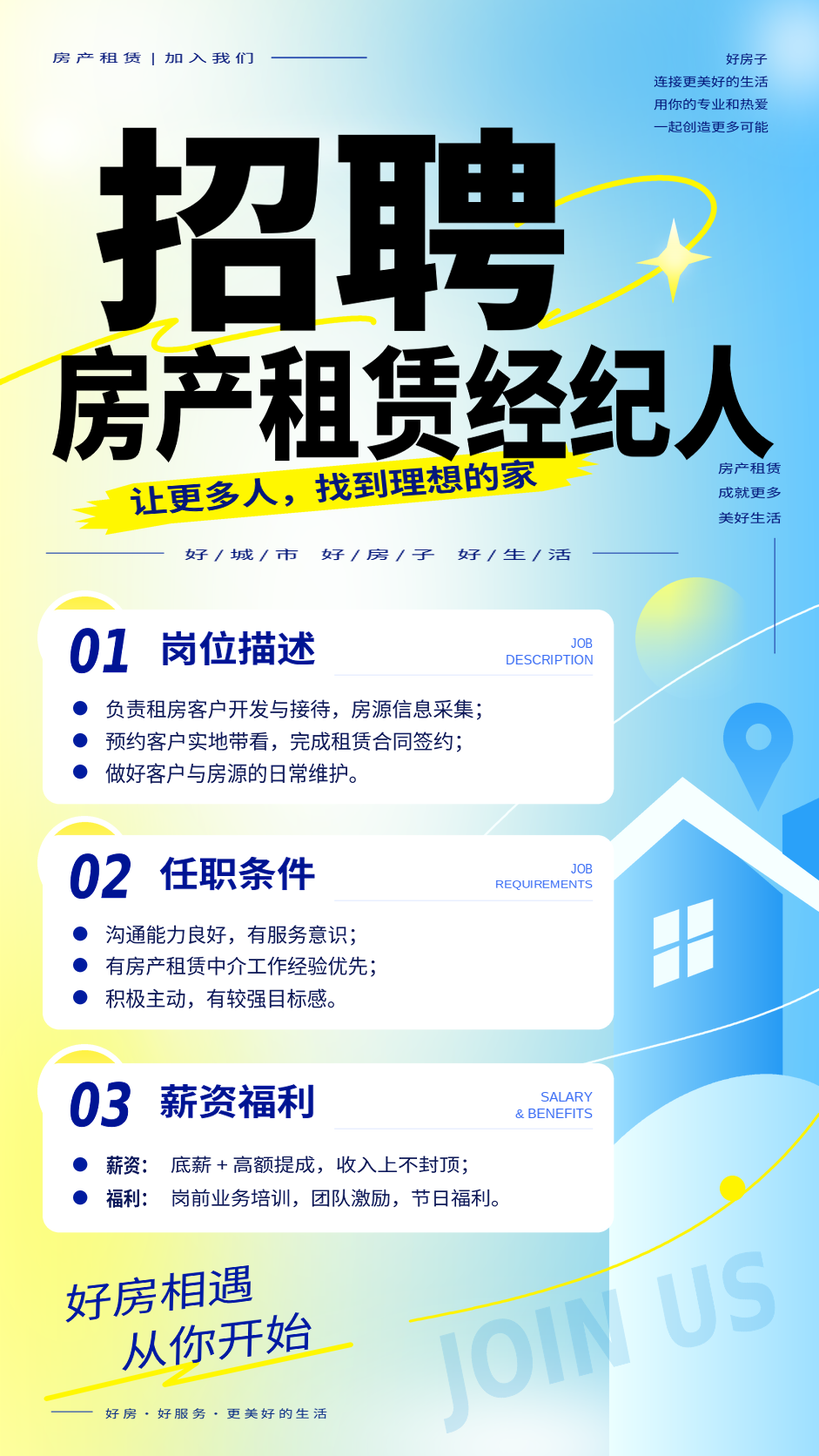
<style>
.page{position:relative;width:819px;height:1456px;background:#ffffff}
.page>*{position:absolute;margin:0}
.t1{font:11.2px "NotoSansCJKsc-Regular";color:#05187a;scale:1.72 1}
.t2{font:11.5px "NotoSansCJKsc-Regular";color:#05187a;scale:1.21 1}
.t3{font:11.5px "NotoSansCJKsc-Regular";color:#05187a;scale:1.25 1}
.t4{font:213.7px "SourceHanSansCN-Heavy";color:#000000;scale:1.12 1}
.t5{font:120.9px "SourceHanSansCN-Heavy";color:#000000;scale:0.86 1}
.t6{font:30.1px "NotoSansCJKsc-Bold";color:#05187a;scale:1.23 1}
.t7{font:11.5px "NotoSansCJKsc-Regular";color:#05187a;scale:1.38 1}
.t8{font:11.8px "NotoSansCJKsc-Regular";color:#05187a;scale:2.07 1}
.t9{font:60px "DejaVuSansCondensed-BoldOblique";color:#001494;scale:0.85 1}
.t10{font:35.6px "NotoSansCJKsc-Bold";color:#001491;scale:1.1 1}
.t11{font:13.1px "LiberationSans";color:#396cf4;scale:0.86 1}
.t12{font:13.1px "LiberationSans";color:#396cf4}
.t13{font:19.5px "NotoSansCJKsc-Regular";color:#0b1654;scale:1.05 1}
.t14{font:20.9px "NotoSansCJKsc-Regular";color:#0b1654}
.t15{font:34.8px "NotoSansCJKsc-Bold";color:#001491;scale:1.12 1}
.t16{font:10.3px "LiberationSans";color:#396cf4;scale:1.18 1}
.t17{font:19.5px "NotoSansCJKsc-Regular";color:#0b1654;scale:1.04 1}
.t18{font:20.1px "NotoSansCJKsc-Regular";color:#0b1654}
.t19{font:19.2px "NotoSansCJKsc-Bold";color:#081455;scale:0.89 1}
.t20{font:17.8px "NotoSansCJKsc-Regular";color:#0b1654;scale:1.16 1}
.t21{font:18.5px "NotoSansCJKsc-Regular";color:#0b1654;scale:1.08 1}
.t22{font:103.6px "DejaVuSansCondensed-Bold";color:#a9ddef;scale:0.87 1}
.t23{font:40.2px "NotoSansCJKsc-Regular";color:#001aa0;scale:1.19 1}
.t24{font:41.3px "NotoSansCJKsc-Regular";color:#001aa0;scale:1.17 1}
.t25{font:10.7px "NotoSansCJKsc-Regular";color:#0a2d86;scale:1.33 1}
</style>
<div class="page">
<p class="t1" style="left:52px;top:52px;width:201px;height:13px">房 产 租 赁  |  加 入 我 们</p>
<p class="t2" style="left:726px;top:53px;width:42px;height:12px">好房子</p>
<p class="t3" style="left:654px;top:76px;width:115px;height:12px">连接更美好的生活</p>
<p class="t3" style="left:654px;top:98px;width:115px;height:13px">用你的专业和热爱</p>
<p class="t3" style="left:654px;top:121px;width:115px;height:12px">一起创造更多可能</p>
<p class="t4" style="left:95px;top:127px;width:470px;height:205px">招聘</p>
<p class="t5" style="left:51px;top:344px;width:724px;height:119px">房产租赁经纪人</p>
<p class="t6" style="left:129px;top:459px;width:409px;height:57px;rotate:-4deg">让更多人，找到理想的家</p>
<p class="t7" style="left:718px;top:462px;width:63px;height:12px">房产租赁</p>
<p class="t7" style="left:718px;top:487px;width:63px;height:12px">成就更多</p>
<p class="t7" style="left:718px;top:512px;width:64px;height:12px">美好生活</p>
<p class="t8" style="left:185px;top:548px;width:387px;height:14px">好 / 城 / 市    好 / 房 / 子    好 / 生 / 活</p>
<p class="t9" style="left:70px;top:628px;width:58px;height:46px">01</p>
<p class="t10" style="left:162px;top:630px;width:154px;height:35px">岗位描述</p>
<p class="t11" style="left:571px;top:638px;width:22px;height:10px">JOB</p>
<p class="t12" style="left:506px;top:655px;width:87px;height:9px">DESCRIPTION</p>
<p class="t13" style="left:105px;top:699px;width:377px;height:21px">负责租房客户开发与接待，房源信息采集；</p>
<p class="t13" style="left:105px;top:731px;width:357px;height:21px">预约客户实地带看，完成租赁合同签约；</p>
<p class="t14" style="left:105px;top:763px;width:252px;height:21px">做好客户与房源的日常维护。</p>
<p class="t9" style="left:70px;top:853px;width:61px;height:46px">02</p>
<p class="t15" style="left:159px;top:856px;width:157px;height:35px">任职条件</p>
<p class="t11" style="left:571px;top:864px;width:22px;height:9px">JOB</p>
<p class="t16" style="left:495px;top:880px;width:98px;height:10px">REQUIREMENTS</p>
<p class="t17" style="left:105px;top:925px;width:250px;height:20px">沟通能力良好，有服务意识；</p>
<p class="t17" style="left:105px;top:956px;width:270px;height:21px">有房产租赁中介工作经验优先；</p>
<p class="t18" style="left:105px;top:988px;width:230px;height:21px">积极主动，有较强目标感。</p>
<p class="t9" style="left:70px;top:1081px;width:61px;height:46px">03</p>
<p class="t10" style="left:159px;top:1084px;width:155px;height:35px">薪资福利</p>
<p class="t12" style="left:541px;top:1092px;width:52px;height:9px">SALARY</p>
<p class="t12" style="left:515px;top:1108px;width:78px;height:10px">&amp; BENEFITS</p>
<p class="t19" style="left:106px;top:1155px;width:41px;height:19px">薪资：</p>
<p class="t20" style="left:171px;top:1155px;width:296px;height:19px">底薪 + 高额提成，收入上不封顶；</p>
<p class="t19" style="left:106px;top:1188px;width:41px;height:19px">福利：</p>
<p class="t21" style="left:172px;top:1188px;width:327px;height:19px">岗前业务培训，团队激励，节日福利。</p>
<p class="t22" style="left:439px;top:1250px;width:337px;height:183px;rotate:-15deg">JOIN US</p>
<p class="t23" style="left:65px;top:1264px;width:188px;height:59px;rotate:-7deg">好房相遇</p>
<p class="t24" style="left:121px;top:1312px;width:192px;height:58px;rotate:-7deg">从你开始</p>
<p class="t25" style="left:105px;top:1408px;width:222px;height:11px">好 房 · 好 服 务 · 更 美 好 的 生 活</p>
</div>
